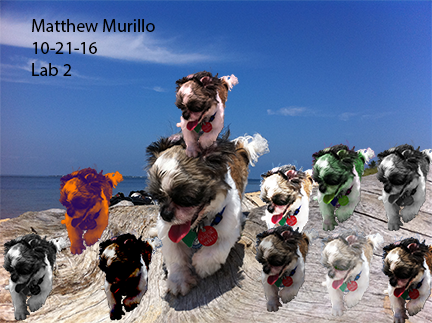
<style>
.page{position:relative;width:432px;height:323px}
.page>*{position:absolute;margin:0}
.t1{font:18px "MyriadPro-Regular";color:#000000}
</style>
<div class="page">
<p class="t1" style="left:32px;top:19px;width:123px;height:57px">Matthew Murillo<br>10-21-16<br>Lab 2</p>
</div>
